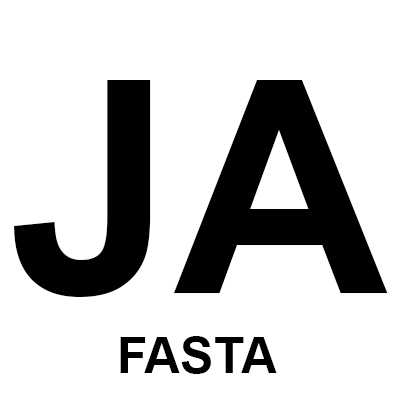
<style>
.page{position:relative;width:396px;height:396px;background:#ffffff}
.page>*{position:absolute;margin:0}
.t1{font:296.5px "Arial-BoldMT";color:#000000}
.t2{font:50px "Arial-BoldMT";color:#000000}
</style>
<div class="page">
<p class="t1" style="left:14px;top:80px;width:374px;height:217px">JA</p>
<p class="t2" style="left:120px;top:336px;width:157px;height:38px">FASTA</p>
</div>
